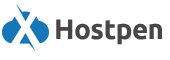
<style>
.page{position:relative;width:170px;height:60px;background:#ffffff}
.page>*{position:absolute;margin:0}
.t1{font:28px "Ubuntu-Bold";letter-spacing:-0.02em;color:#474747}
</style>
<div class="page">
<p class="t1" style="left:56px;top:19px;width:106px;height:26px">Hostpen</p>
</div>
